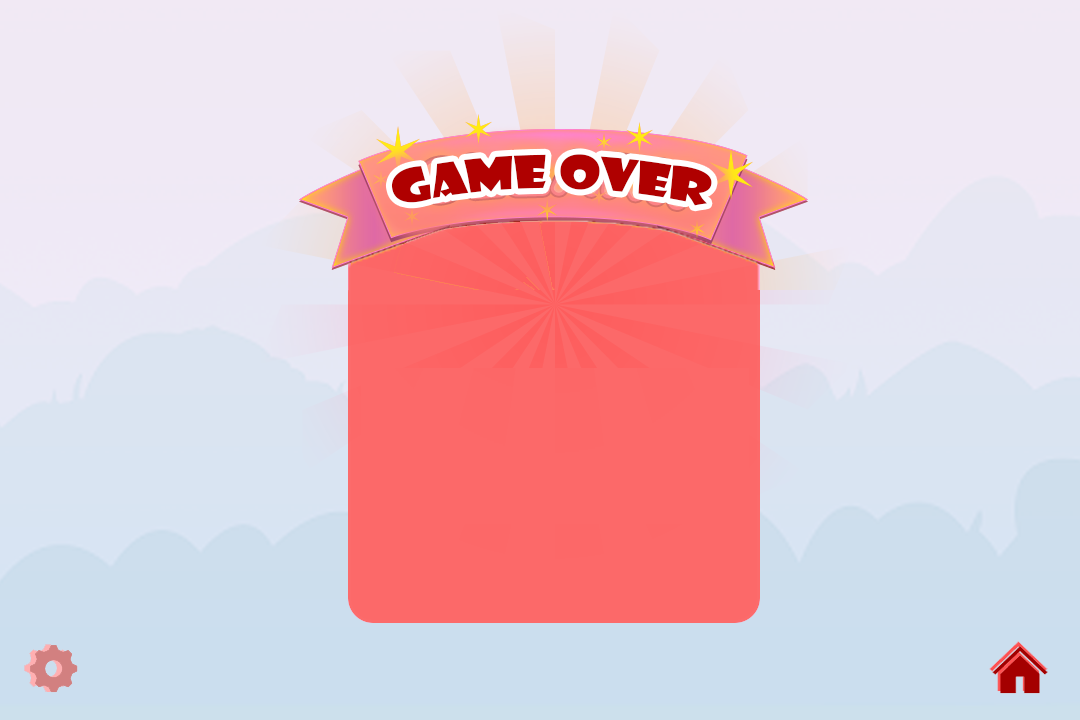
<style>
.page{position:relative;width:1080px;height:720px}
.page>*{position:absolute;margin:0}
.t1{font:43.8px "ShowcardGothic-Reg";color:#af0000}
</style>
<div class="page">
<p class="t1" style="left:391px;top:154px;width:321px;height:52px">game over</p>
</div>
